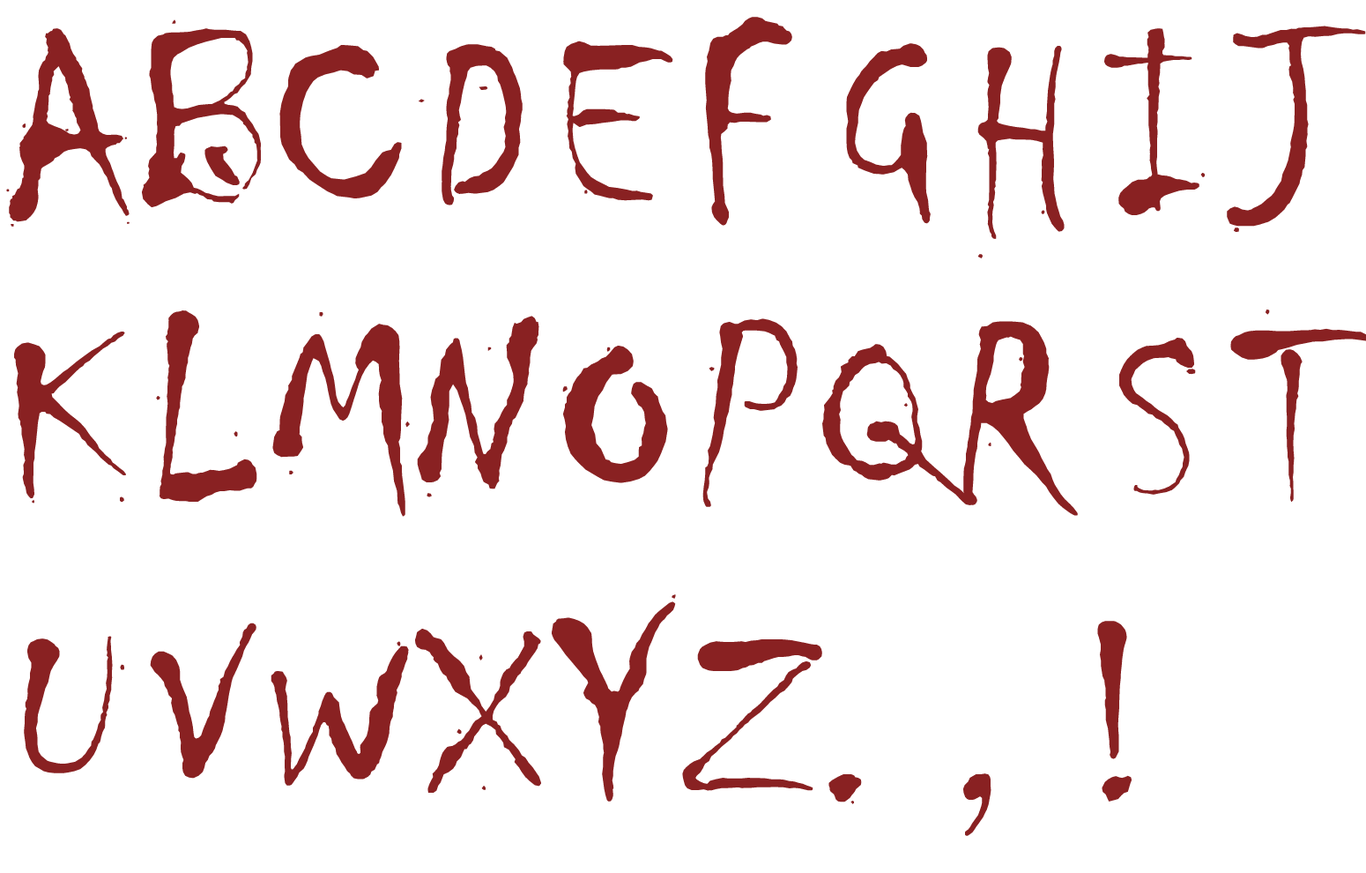
<style>
.page{position:relative;width:1366px;height:873px;background:#ffffff}
.page>*{position:absolute;margin:0}
.t1{font:264.3px "Chiller-Regular";letter-spacing:-0.025em;color:#892122}
.t2{font:242.4px "Chiller-Regular";letter-spacing:-0.025em;color:#892122}
</style>
<div class="page">
<p class="t1" style="left:705px;top:17px;width:87px;height:209px">F</p>
<p class="t1" style="left:6px;top:28px;width:124px;height:199px">A</p>
<p class="t1" style="left:142px;top:19px;width:119px;height:188px">B</p>
<p class="t1" style="left:1105px;top:28px;width:100px;height:187px">I</p>
<p class="t1" style="left:1227px;top:26px;width:139px;height:206px">J</p>
<p class="t1" style="left:563px;top:41px;width:110px;height:160px">E</p>
<p class="t1" style="left:279px;top:45px;width:123px;height:153px">C</p>
<p class="t1" style="left:419px;top:44px;width:104px;height:161px">D</p>
<p class="t1" style="left:846px;top:43px;width:85px;height:181px">G</p>
<p class="t1" style="left:978px;top:46px;width:87px;height:212px">H</p>
<p class="t1" style="left:156px;top:310px;width:101px;height:192px">L</p>
<p class="t1" style="left:272px;top:312px;width:138px;height:205px">M</p>
<p class="t1" style="left:417px;top:316px;width:122px;height:181px">N</p>
<p class="t1" style="left:703px;top:318px;width:95px;height:189px">P</p>
<p class="t1" style="left:964px;top:321px;width:114px;height:195px">R</p>
<p class="t1" style="left:14px;top:331px;width:112px;height:172px">K</p>
<p class="t1" style="left:1120px;top:338px;width:76px;height:157px">S</p>
<p class="t1" style="left:562px;top:346px;width:106px;height:137px">O</p>
<p class="t1" style="left:822px;top:344px;width:151px;height:161px">Q</p>
<p class="t1" style="left:552px;top:594px;width:124px;height:207px">Y</p>
<p class="t1" style="left:150px;top:622px;width:107px;height:156px">V</p>
<p class="t1" style="left:415px;top:629px;width:126px;height:163px">X</p>
<p class="t1" style="left:1097px;top:621px;width:35px;height:180px">!</p>
<p class="t1" style="left:24px;top:636px;width:100px;height:137px">U</p>
<p class="t2" style="left:271px;top:641px;width:138px;height:144px">W</p>
<p class="t1" style="left:682px;top:639px;width:140px;height:152px">Z</p>
<p class="t1" style="left:829px;top:774px;width:33px;height:30px">.</p>
<p class="t1" style="left:964px;top:773px;width:28px;height:63px">,</p>
</div>
